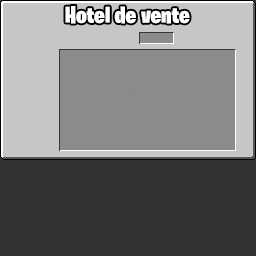
<style>
.page{position:relative;width:256px;height:256px;background:#333333}
.page>*{position:absolute;margin:0}
.t1{font:24px "BurbankBigCondensed-Black";color:#ffffff}
</style>
<div class="page">
<p class="t1" style="left:65px;top:5px;width:125px;height:19px">Hotel de vente</p>
</div>
